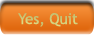
<style>
.page{position:relative;width:94px;height:37px}
.page>*{position:absolute;margin:0}
.t1{font:15px "TrebuchetMS";color:#cfcc79}
</style>
<div class="page">
<p class="t1" style="left:18px;top:13px;width:60px;height:14px">Yes, Quit</p>
</div>
